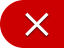
<style>
.page{position:relative;width:64px;height:48px;background:#cc0000}
.page>*{position:absolute;margin:0}
.t1{font:40px "LucidaGrande";color:#ffffff}
</style>
<div class="page">
<p class="t1" style="left:25px;top:12px;width:24px;height:24px">×</p>
</div>
